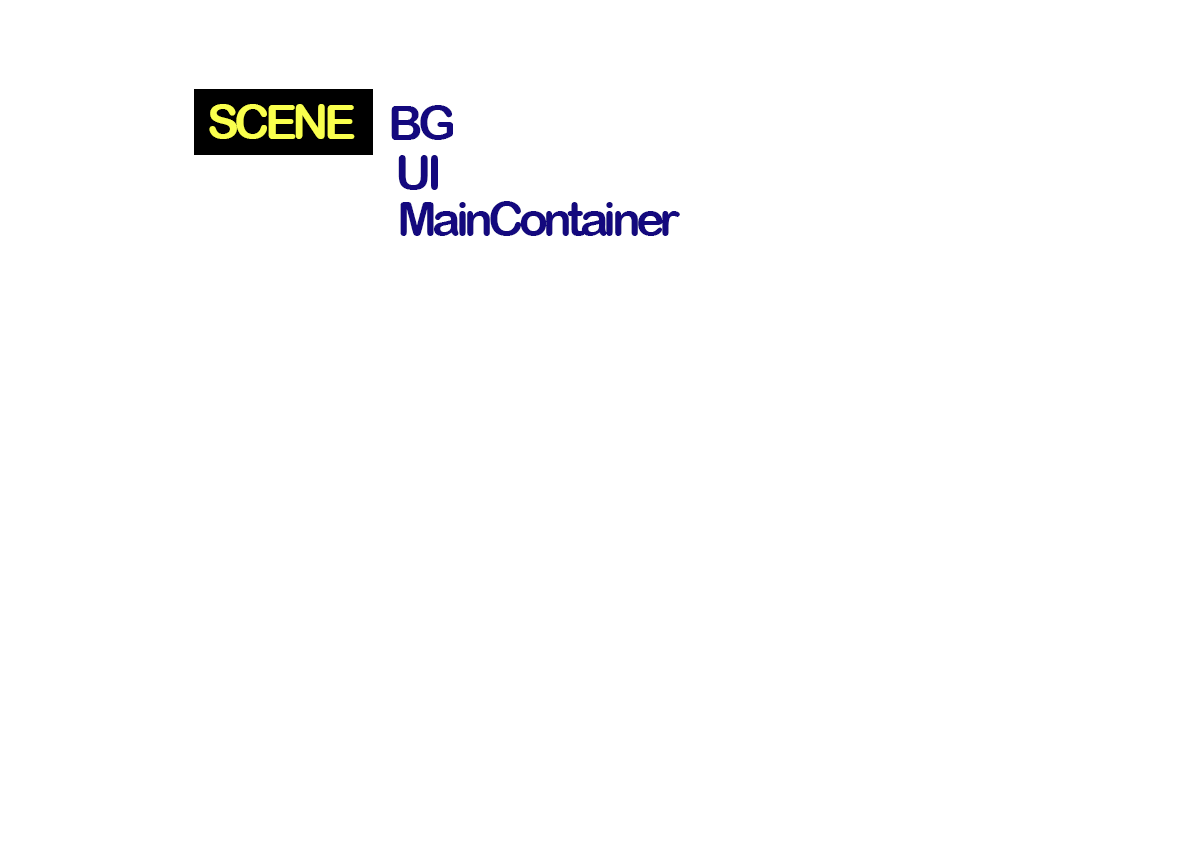
<style>
.page{position:relative;width:1200px;height:860px;background:#ffffff}
.page>*{position:absolute;margin:0}
.t1{font:48px "ArialRoundedMTBold";letter-spacing:-0.1em;color:#f9ff4d}
.t2{font:48px "ArialRoundedMTBold";letter-spacing:-0.1em;color:#14097e}
</style>
<div class="page">
<p class="t1" style="left:209px;top:104px;width:146px;height:35px">SCENE</p>
<p class="t2" style="left:391px;top:105px;width:62px;height:35px">BG</p>
<p class="t2" style="left:398px;top:155px;width:40px;height:35px">UI</p>
<p class="t2" style="left:400px;top:201px;width:280px;height:35px">MainContainer</p>
</div>
